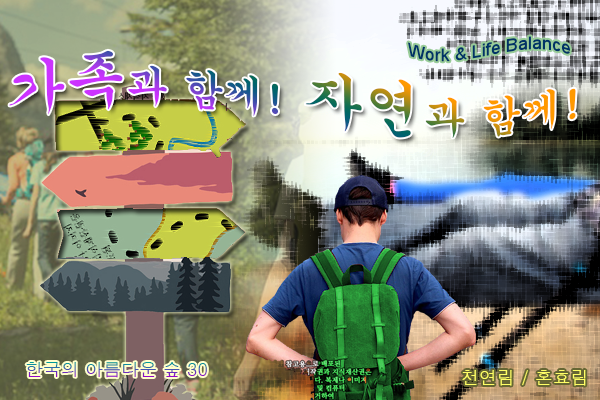
<style>
.page{position:relative;width:600px;height:400px}
.page>*{position:absolute;margin:0}
.t1{font:17.8px "ArialMT";color:#003366}
.t2{font:42.1px "Gungsuh"}
.t3{font:60.2px "Gungsuh"}
.t4{font:17.8px "Dotum"}
.t5{font:17.8px "Dotum";color:#ffff66}
</style>
<div class="page">
<p class="t1" style="left:408px;top:36px;width:162px;height:26px">Work &amp; Life Balance</p>
<p class="t2" style="left:9px;top:50px;width:567px;height:88px"><span class="t3">가족</span>과 함께!<span class="t3"> 자연</span>과 함께!</p>
<p class="t4" style="left:26px;top:362px;width:181px;height:16px">한국의 아름다운 숲 30</p>
<p class="t5" style="left:462px;top:370px;width:124px;height:16px">천연림 / 혼효림</p>
</div>
